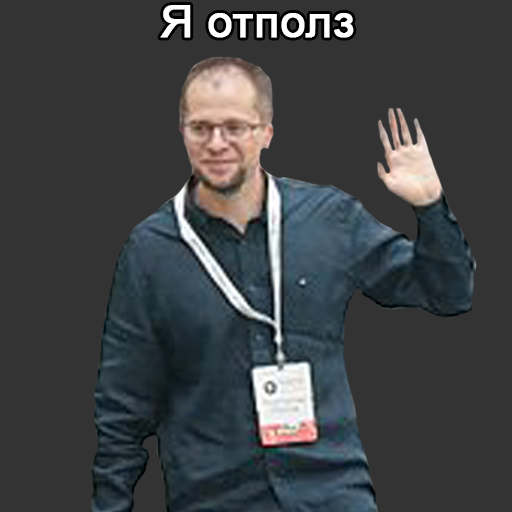
<style>
.page{position:relative;width:512px;height:512px;background:#333333}
.page>*{position:absolute;margin:0}
.t1{font:45px "ArialMT";color:#ffffff;font-weight:bold}
</style>
<div class="page">
<p class="t1" style="left:160px;top:5px;width:194px;height:33px">Я отполз</p>
</div>
